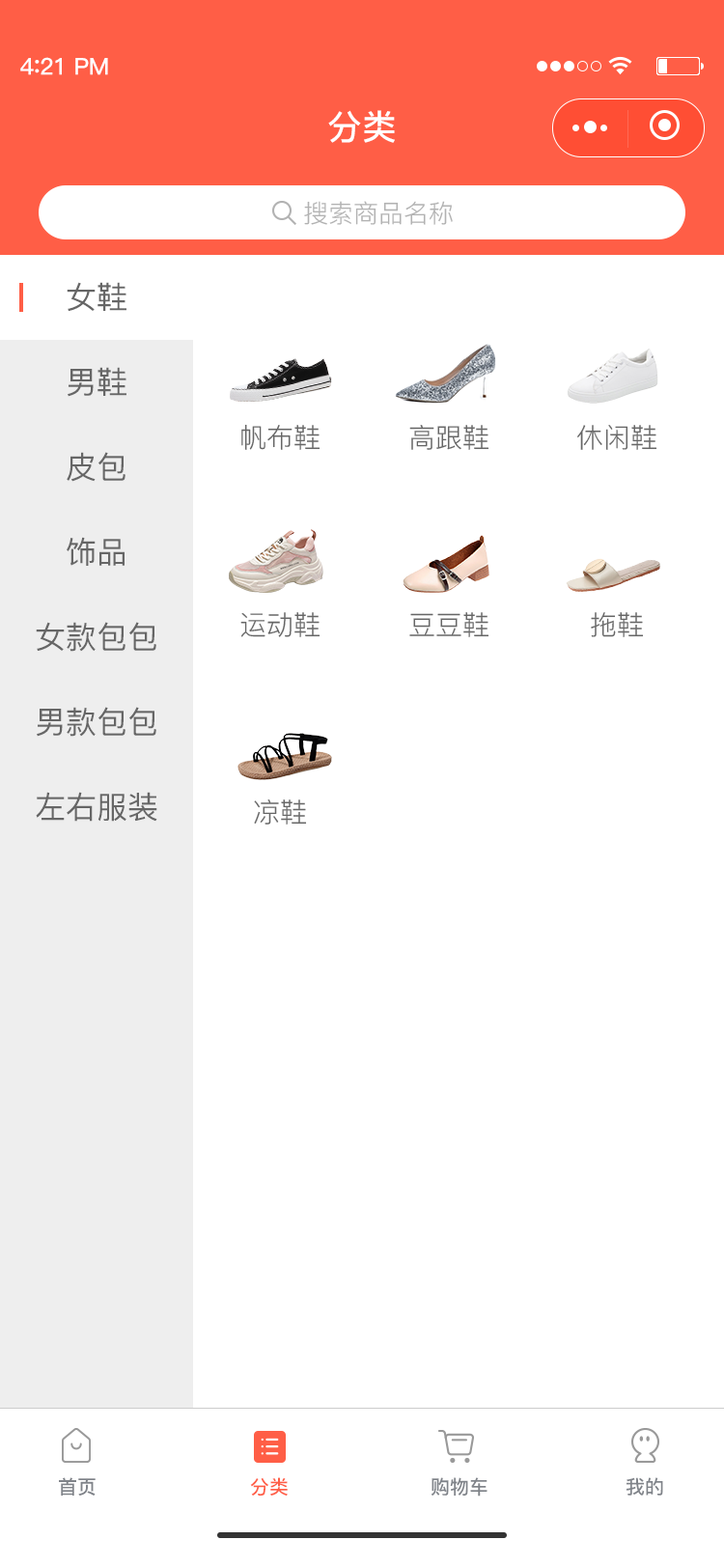
<style>
.page{position:relative;width:724px;height:1568px;background:#ffffff}
.page>*{position:absolute;margin:0}
.t1{font:23.2px "PingFang-SC-Bold";letter-spacing:-0.02em;color:#fefefe}
.t2{font:25.1px "PingFang-SC-Bold";letter-spacing:-0.02em;color:#fefefe}
.t3{font:34.8px "PingFang-SC-Bold";color:#ffffff}
.t4{font:25.1px "PingFang-SC-Regular";color:#b2b2b2}
.t5{font:30.9px "PingFang-SC-Medium";color:#666666}
.t6{font:27px "PingFang-SC-Regular";color:#666666}
.t7{font:19.3px "PingFang-SC-Bold";color:#7f8389}
.t8{font:19.3px "PingFang-SC-Bold";color:#ff5e46}
</style>
<div class="page">
<p class="t1" style="left:20px;top:57px;width:88px;height:18px">4<span class="t2">:</span>21 PM</p>
<p class="t3" style="left:328px;top:110px;width:67px;height:33px">分类</p>
<p class="t4" style="left:304px;top:201px;width:149px;height:24px">搜索商品名称</p>
<p class="t5" style="left:67px;top:282px;width:59px;height:29px">女鞋</p>
<p class="t5" style="left:68px;top:367px;width:58px;height:30px">男鞋</p>
<p class="t6" style="left:241px;top:424px;width:80px;height:26px">帆布鞋</p>
<p class="t6" style="left:409px;top:425px;width:81px;height:25px">高跟鞋</p>
<p class="t6" style="left:577px;top:425px;width:81px;height:25px">休闲鞋</p>
<p class="t5" style="left:67px;top:452px;width:59px;height:30px">皮包</p>
<p class="t5" style="left:67px;top:537px;width:58px;height:29px">饰品</p>
<p class="t6" style="left:240px;top:612px;width:81px;height:25px">运动鞋</p>
<p class="t6" style="left:409px;top:612px;width:81px;height:25px">豆豆鞋</p>
<p class="t6" style="left:591px;top:612px;width:53px;height:25px">拖鞋</p>
<p class="t5" style="left:36px;top:622px;width:120px;height:30px">女款包包</p>
<p class="t5" style="left:37px;top:707px;width:119px;height:30px">男款包包</p>
<p class="t5" style="left:36px;top:792px;width:121px;height:30px">左右服装</p>
<p class="t6" style="left:254px;top:799px;width:53px;height:26px">凉鞋</p>
<p class="t7" style="left:59px;top:1477px;width:37px;height:19px">首页</p>
<p class="t8" style="left:250px;top:1477px;width:38px;height:19px">分类</p>
<p class="t7" style="left:432px;top:1477px;width:56px;height:20px">购物车</p>
<p class="t7" style="left:627px;top:1477px;width:36px;height:19px">我的</p>
</div>
